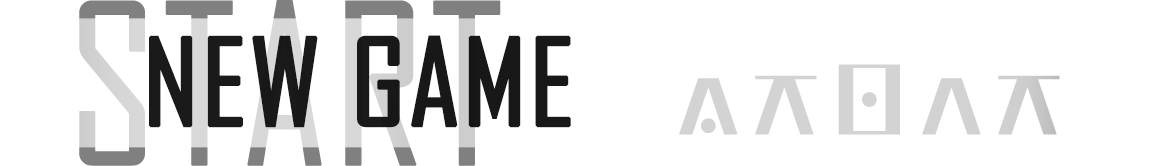
<style>
.page{position:relative;width:1156px;height:166px;background:#ffffff}
.page>*{position:absolute;margin:0}
.t1{font:115px "AgencyFB-Reg";color:#181818;text-transform:uppercase;font-weight:bold;scale:1.1 1}
.t2{font:150px "GLT-GonunneTerminus-Regular";color:#d3d3d3;text-transform:uppercase;font-weight:bold}
</style>
<div class="page">
<p class="t1" style="left:149px;top:35px;width:422px;height:93px">NEW GAME</p>
<p class="t2" style="left:679px;top:64px;width:381px;height:71px">START</p>
</div>
